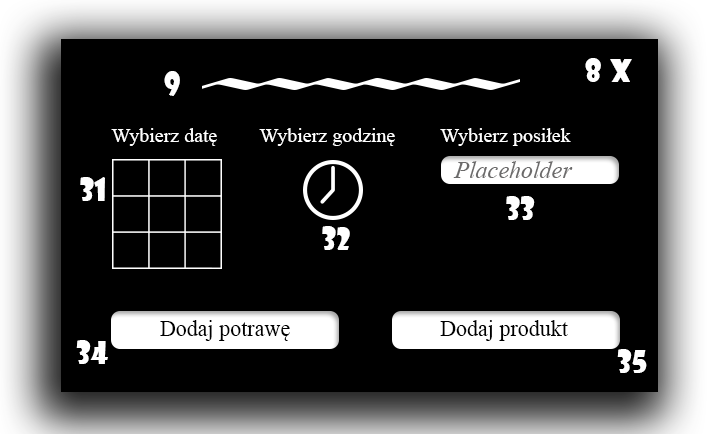
<style>
.page{position:relative;width:716px;height:434px;background:#000000}
.page>*{position:absolute;margin:0}
.t1{font:30px "ShowcardGothic-Reg";color:#ffffff}
.t2{font:30px "ShowcardGothic-Reg";color:#fffefe}
.t3{font:20px "TimesNewRomanPSMT";color:#ffffff}
.t4{font:24px "TimesNewRomanPS-ItalicMT";color:#6b6a6a}
.t5{font:22px "TimesNewRomanPSMT";color:#000000}
</style>
<div class="page">
<p class="t1" style="left:585px;top:58px;width:16px;height:24px">8</p>
<p class="t2" style="left:610px;top:59px;width:22px;height:23px">x</p>
<p class="t1" style="left:164px;top:71px;width:16px;height:25px">9</p>
<p class="t3" style="left:111px;top:128px;width:106px;height:18px">Wybierz datę</p>
<p class="t3" style="left:259px;top:128px;width:136px;height:18px">Wybierz godzinę</p>
<p class="t3" style="left:440px;top:128px;width:131px;height:18px">Wybierz posiłek</p>
<p class="t4" style="left:453px;top:161px;width:120px;height:17px">Placeholder</p>
<p class="t1" style="left:80px;top:177px;width:25px;height:24px">31</p>
<p class="t1" style="left:506px;top:196px;width:29px;height:24px">33</p>
<p class="t1" style="left:322px;top:226px;width:28px;height:24px">32</p>
<p class="t5" style="left:160px;top:320px;width:130px;height:21px">Dodaj potrawę</p>
<p class="t5" style="left:440px;top:320px;width:128px;height:21px">Dodaj produkt</p>
<p class="t1" style="left:76px;top:340px;width:32px;height:24px">34</p>
<p class="t1" style="left:617px;top:349px;width:30px;height:24px">35</p>
</div>
